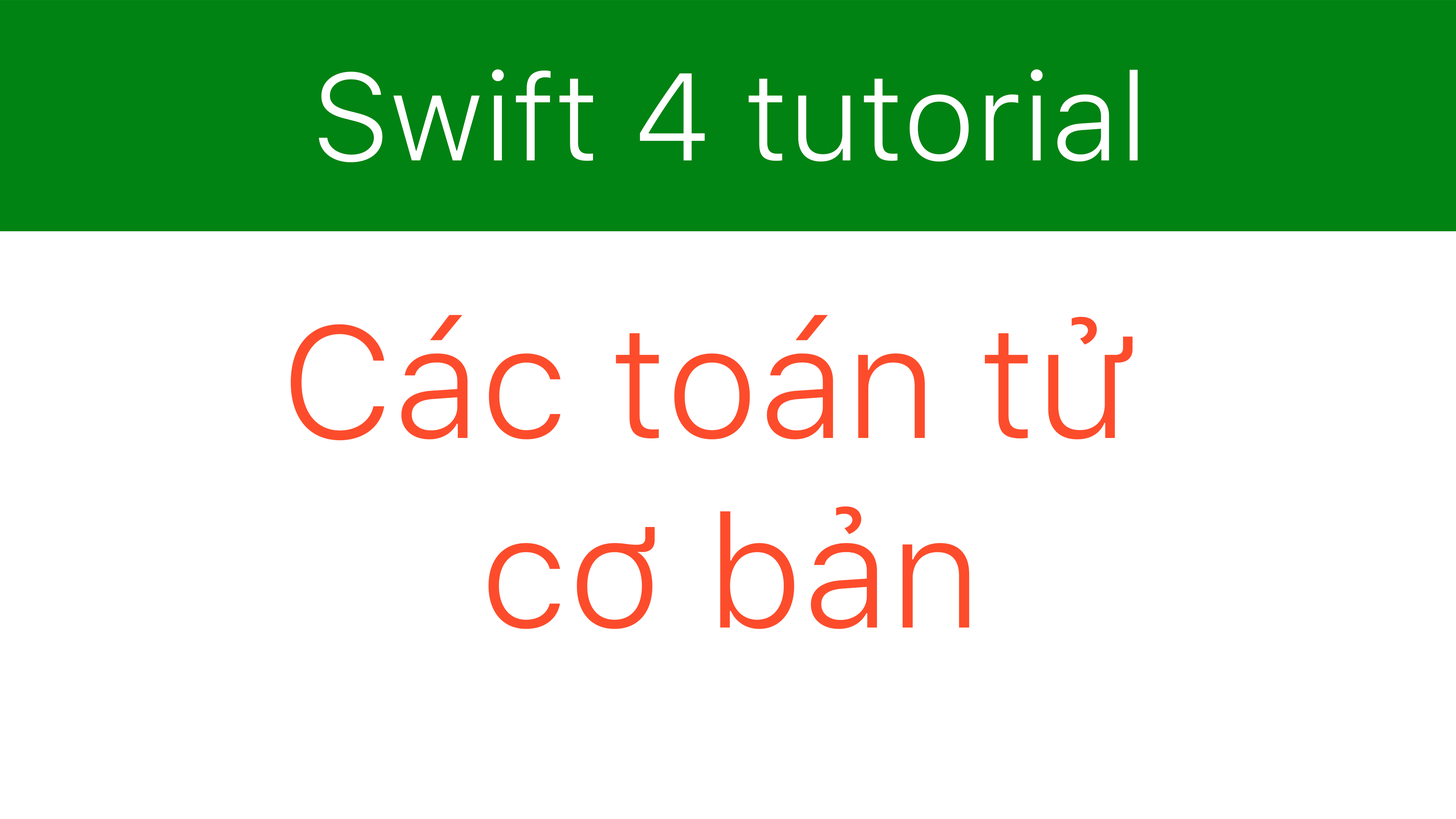
<style>
.page{position:relative;width:1456px;height:819px;background:#ffffff}
.page>*{position:absolute;margin:0}
.t1{font:123.2px "SFUIText-Light";color:#ffffff}
.t2{font:158px/37.9px "SFUIText-Light";color:#fd4c2b}
</style>
<div class="page">
<p class="t1" style="left:319px;top:69px;width:819px;height:93px">Swift 4 tutorial</p>
<p class="t2" style="left:290px;top:315px;width:843px;height:314px;text-align:center">Các toán tử <br><br><br><br><br>cơ bản</p>
</div>
